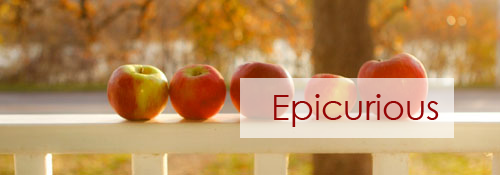
<style>
.page{position:relative;width:500px;height:175px}
.page>*{position:absolute;margin:0}
.t1{font:35px "CenturyGothic";color:#940606}
</style>
<div class="page">
<p class="t1" style="left:274px;top:94px;width:165px;height:33px">Epicurious</p>
</div>
